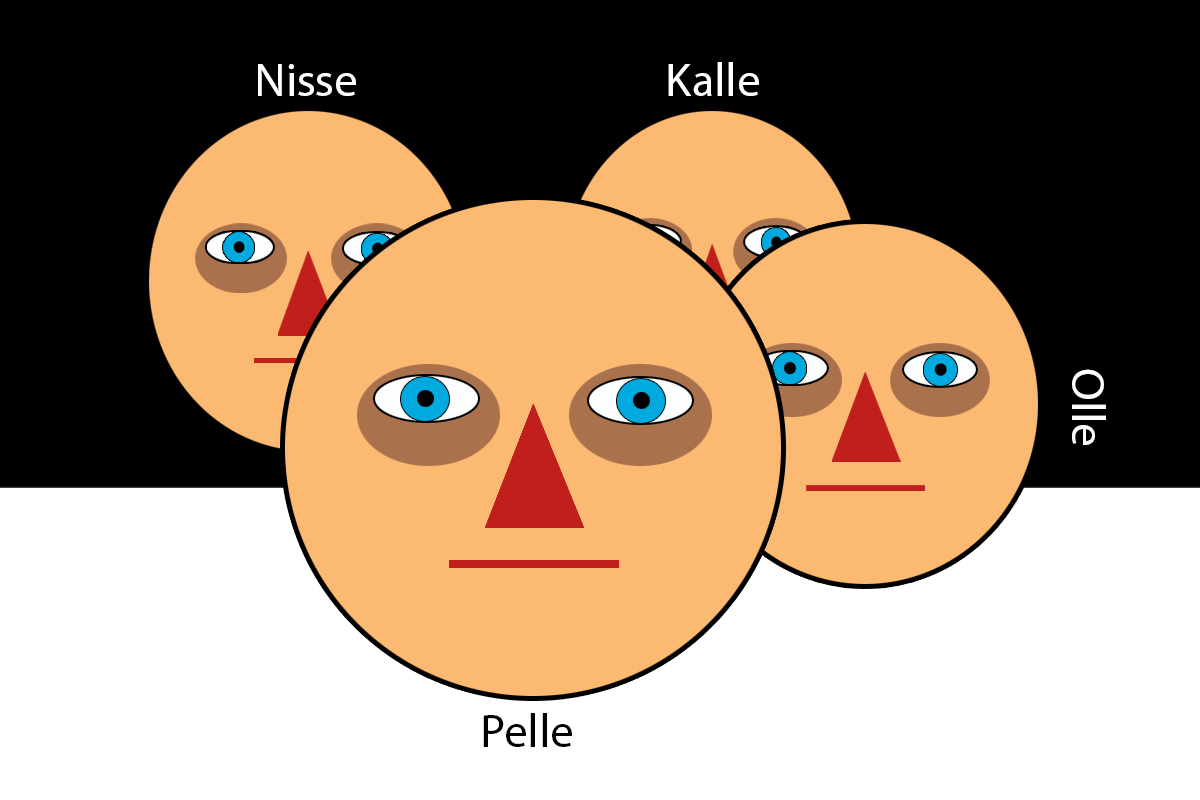
<style>
.page{position:relative;width:1200px;height:800px;background:#000000}
.page>*{position:absolute;margin:0}
.t1{font:47.2px "MyriadPro-Regular";color:#ffffff}
.t2{font:47.2px "MyriadPro-Regular";color:#000000}
</style>
<div class="page">
<p class="t1" style="left:258px;top:64px;width:98px;height:32px">Nisse</p>
<p class="t1" style="left:668px;top:62px;width:91px;height:34px">Kalle</p>
<p class="t1" style="left:1072px;top:369px;width:34px;height:76px;rotate:90deg">Olle</p>
<p class="t2" style="left:483px;top:713px;width:89px;height:34px">Pelle</p>
</div>
